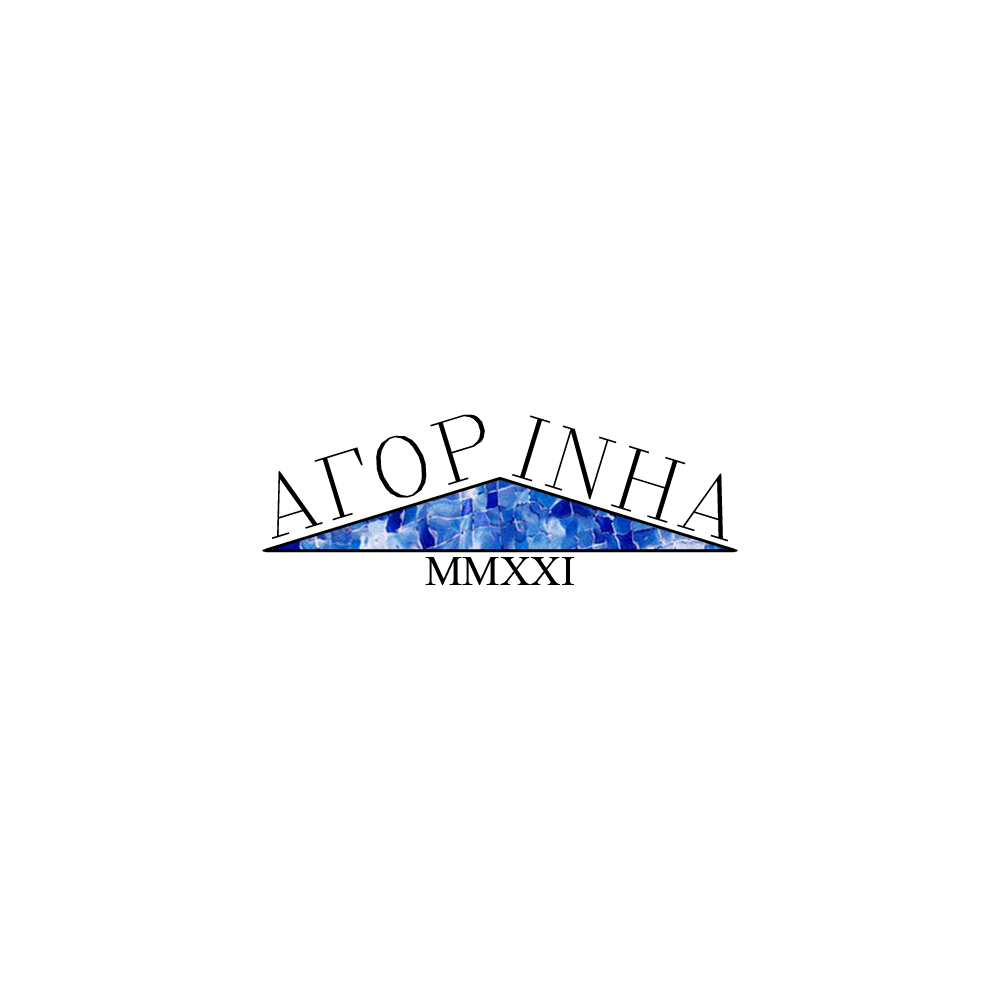
<style>
.page{position:relative;width:1000px;height:1000px;background:#ffffff}
.page>*{position:absolute;margin:0}
.t1{font:83.3px "GreekC";letter-spacing:0.01em;color:#000000}
.t2{font:41.7px "TimesNewRomanPSMT";letter-spacing:0.01em;color:#000000}
</style>
<div class="page">
<p class="t1" style="left:272px;top:414px;width:456px;height:128px">AGORINHA</p>
<p class="t2" style="left:425px;top:557px;width:149px;height:28px">MMXXI</p>
</div>
